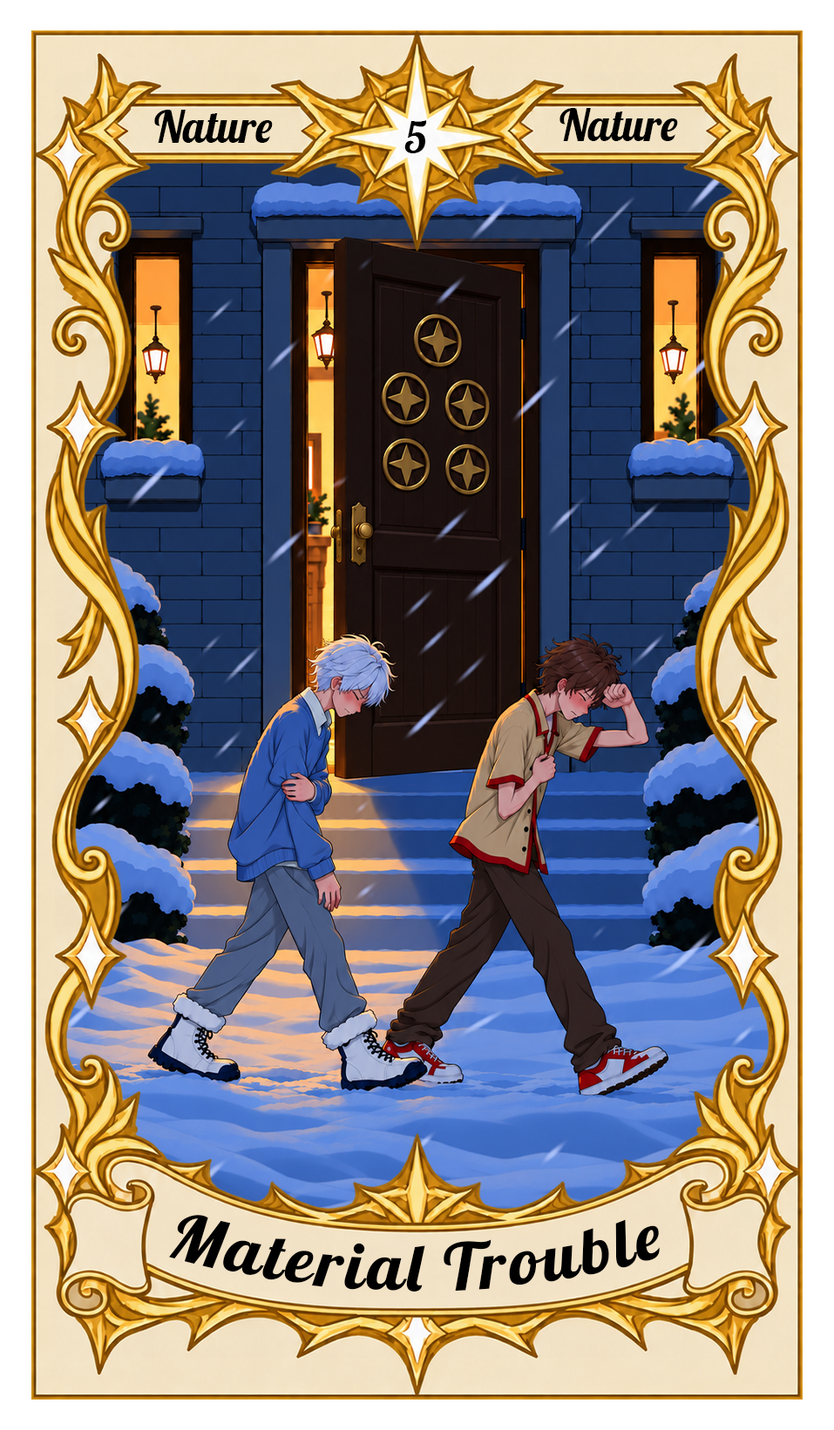
<style>
.page{position:relative;width:834px;height:1430px}
.page>*{position:absolute;margin:0}
.t1{font:43.6px "Lobster-Regular";color:#000000}
.t2{font:65.3px "Lobster-Regular";letter-spacing:0.05em;color:#000000}
</style>
<div class="page">
<p class="t1" style="left:154px;top:110px;width:119px;height:33px">Nature</p>
<p class="t1" style="left:559px;top:108px;width:119px;height:33px">Nature</p>
<p class="t1" style="left:404px;top:120px;width:23px;height:33px">5</p>
<p class="t2" style="left:169px;top:1215px;width:490px;height:77px">Material Trouble</p>
</div>
